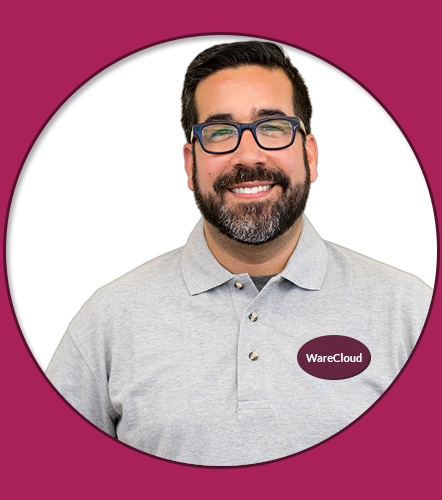
<style>
.page{position:relative;width:442px;height:500px;background:#a82159}
.page>*{position:absolute;margin:0}
.t1{font:11px "Lato-Bold";color:#fefefe}
</style>
<div class="page">
<p class="t1" style="left:306px;top:353px;width:56px;height:9px">WareCloud</p>
</div>
